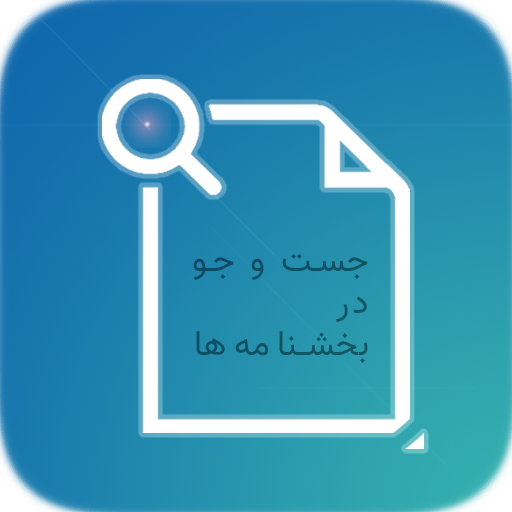
<style>
.page{position:relative;width:512px;height:512px}
.page>*{position:absolute;margin:0}
.t1{font:35px "Vazir";letter-spacing:0.09em;color:#115263}
</style>
<div class="page">
<p class="t1" style="left:193px;top:254px;width:175px;height:109px;text-align:right">جست و جو<br>در<br>بخشنامه‌ها</p>
</div>
